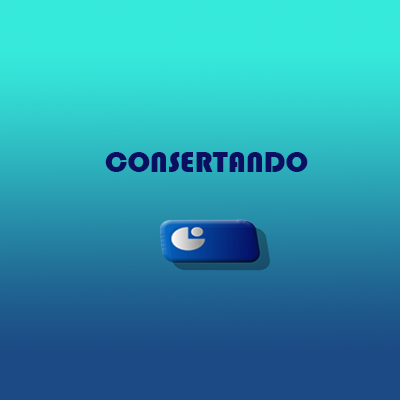
<style>
.page{position:relative;width:400px;height:400px}
.page>*{position:absolute;margin:0}
.t1{font:30px "Bauhaus93";color:#0a0f62}
</style>
<div class="page">
<p class="t1" style="left:105px;top:152px;width:203px;height:20px">CONSERTANDO</p>
</div>
